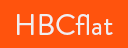
<style>
.page{position:relative;width:128px;height:48px;background:#ff530d}
.page>*{position:absolute;margin:0}
.t1{font:29.6px "BrandonGrotesque-Regular";color:#efefef}
</style>
<div class="page">
<p class="t1" style="left:17px;top:14px;width:96px;height:21px">HBCflat</p>
</div>
